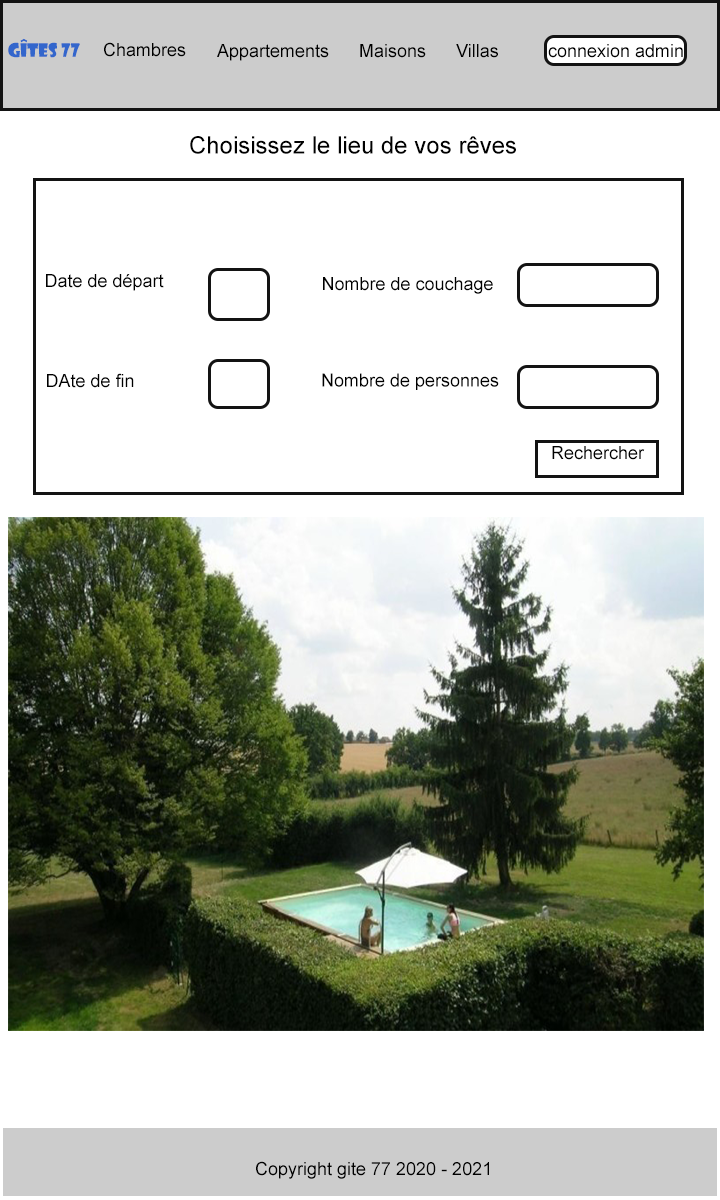
<style>
.page{position:relative;width:720px;height:1200px;background:#ffffff}
.page>*{position:absolute;margin:0}
.t1{font:18px "ShowcardGothic-Reg";color:#3366cc}
.t2{font:18px "ArialMT";color:#000000}
.t3{font:24px "ArialMT";color:#000000}
</style>
<div class="page">
<p class="t1" style="left:8px;top:38px;width:72px;height:20px">Gîtes 77</p>
<p class="t2" style="left:104px;top:42px;width:82px;height:15px">Chambres</p>
<p class="t2" style="left:217px;top:44px;width:112px;height:17px">Appartements</p>
<p class="t2" style="left:360px;top:44px;width:66px;height:14px">Maisons</p>
<p class="t2" style="left:456px;top:44px;width:42px;height:14px">Villas</p>
<p class="t2" style="left:548px;top:44px;width:135px;height:14px">connexion admin</p>
<p class="t3" style="left:190px;top:136px;width:326px;height:18px">Choisissez le lieu de vos rêves</p>
<p class="t2" style="left:46px;top:274px;width:118px;height:17px">Date de départ</p>
<p class="t2" style="left:323px;top:277px;width:170px;height:17px">Nombre de couchage</p>
<p class="t2" style="left:47px;top:373px;width:87px;height:15px">DAte de fin</p>
<p class="t2" style="left:322px;top:373px;width:177px;height:17px">Nombre de personnes</p>
<p class="t2" style="left:552px;top:446px;width:93px;height:14px">Rechercher</p>
<p class="t2" style="left:256px;top:1161px;width:233px;height:18px">Copyright gite 77 2020 - 2021</p>
</div>
